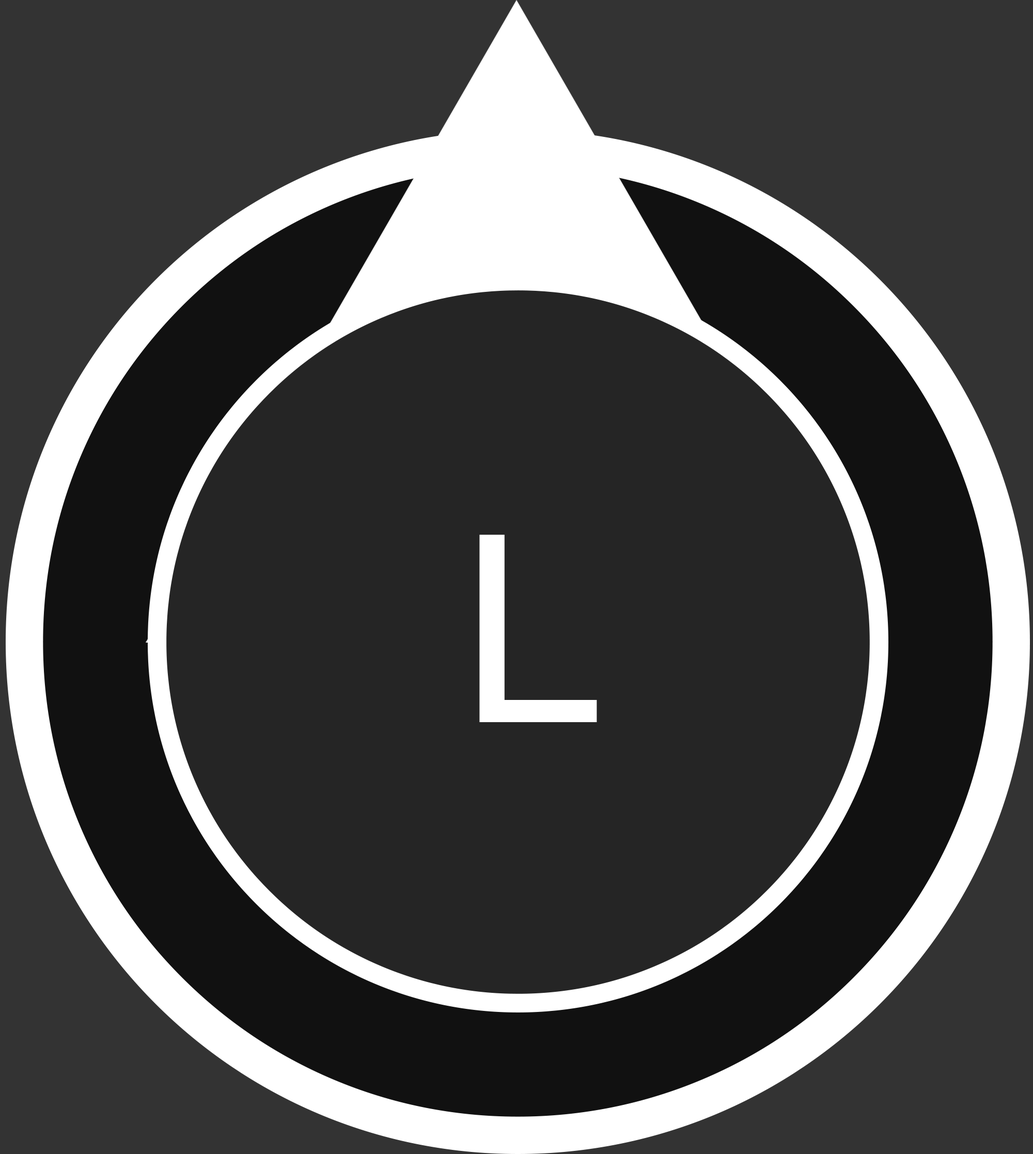
<style>
.page{position:relative;width:1033px;height:1154px;background:#252525}
.page>*{position:absolute;margin:0}
.t1{font:261.5px "ArialMT";color:#ffffff}
</style>
<div class="page">
<p class="t1" style="left:479px;top:535px;width:118px;height:187px">L</p>
</div>
